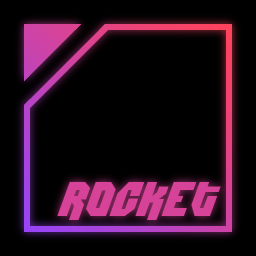
<style>
.page{position:relative;width:256px;height:256px;background:#000000}
.page>*{position:absolute;margin:0}
.t1{font:51.1px "Dimitri";color:#d64398;scale:0.94 1}
</style>
<div class="page">
<p class="t1" style="left:57px;top:182px;width:164px;height:38px">Rocket</p>
</div>
